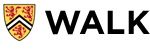
<style>
.page{position:relative;width:150px;height:50px;background:#ffffff}
.page>*{position:absolute;margin:0}
.t1{font:33.3px "Gotham-Bold";color:#000000}
</style>
<div class="page">
<p class="t1" style="left:45px;top:10px;width:105px;height:25px">WALK</p>
</div>
